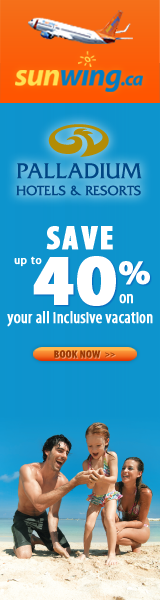
<style>
.page{position:relative;width:160px;height:600px}
.page>*{position:absolute;margin:0}
.t1{font:33.5px "MyriadPro-BlackCond";letter-spacing:0.05em;color:#ffffff;text-transform:uppercase;font-weight:bold}
.t2{font:11px "MyriadPro-Regular";letter-spacing:0.05em;color:#ffffff;font-weight:bold}
.t3{font:71.9px "MyriadPro-Black";color:#ffffff;font-weight:bold}
.t4{font:71.9px "MyriadPro-Black";letter-spacing:0.05em;color:#ffffff;font-weight:bold}
.t5{font:60px "MyriadPro-Black";letter-spacing:0.05em;color:#ffffff;font-weight:bold}
.t6{font:17px "MyriadPro-Cond";color:#ffffff;font-weight:bold}
</style>
<div class="page">
<p class="t1" style="left:46px;top:226px;width:67px;height:24px">Save</p>
<p class="t2" style="left:14px;top:256px;width:28px;height:11px">up to</p>
<p class="t3" style="left:33px;top:256px;width:117px;height:50px"><span class="t4"> </span>40<span class="t5">%</span></p>
<p class="t6" style="left:119px;top:294px;width:14px;height:10px">on</p>
<p class="t6" style="left:7px;top:311px;width:146px;height:16px">your all inclusive vacation</p>
</div>
